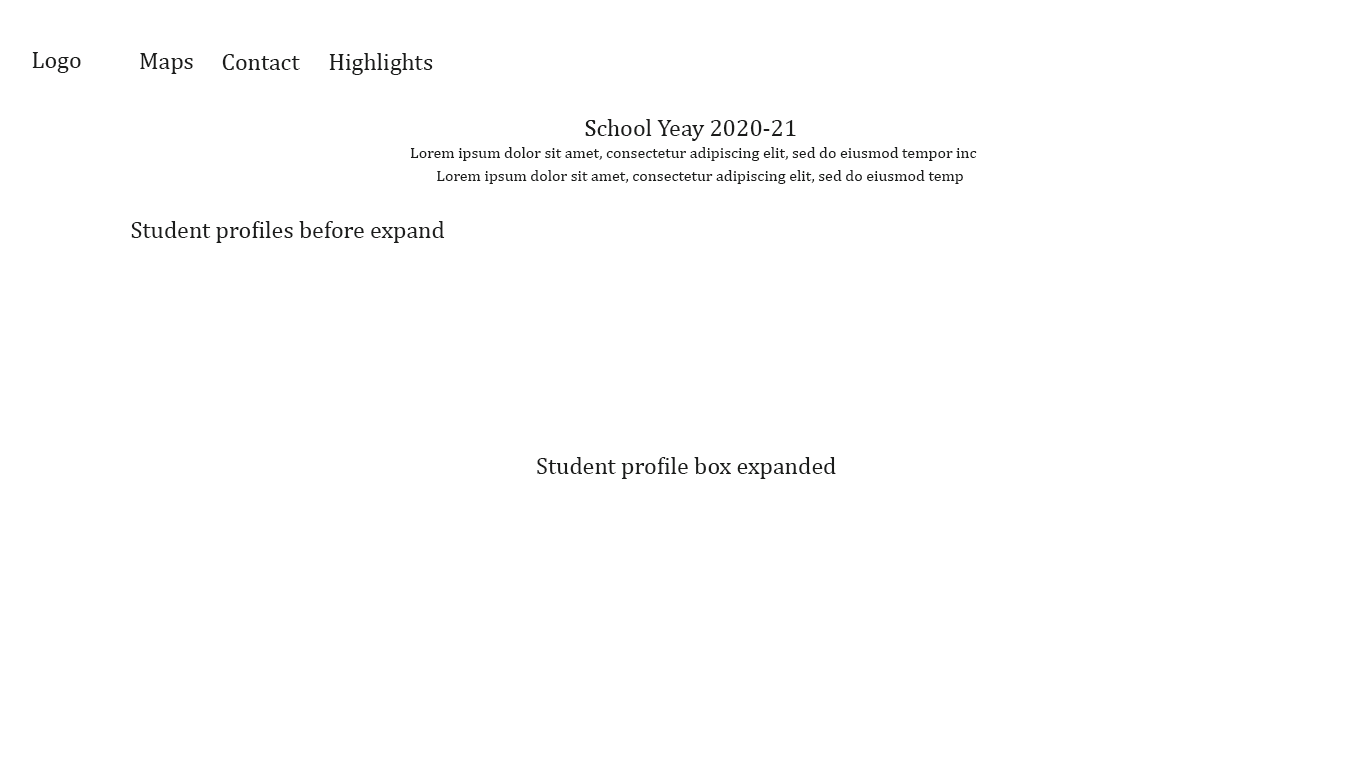
<style>
.page{position:relative;width:1366px;height:768px;background:#ffffff}
.page>*{position:absolute;margin:0}
.t1{font:24px "CambriaMath";color:#1b1c1b}
.t2{font:24px/0px "CambriaMath";color:#1b1c1b}
.t3{font:16px "CambriaMath";color:#1b1c1b}
</style>
<div class="page">
<p class="t1" style="left:32px;top:52px;width:49px;height:21px">Logo</p>
<p class="t1" style="left:140px;top:53px;width:53px;height:21px">Maps</p>
<p class="t1" style="left:222px;top:54px;width:78px;height:16px">Contact</p>
<p class="t1" style="left:329px;top:53px;width:104px;height:22px">Highlights</p>
<p class="t2" style="left:585px;top:119px;width:211px;height:22px">School Yeay 2020-21 <br>S</p>
<p class="t3" style="left:410px;top:147px;width:567px;height:14px">Lorem ipsum dolor sit amet, consectetur adipiscing elit, sed do eiusmod tempor inc</p>
<p class="t3" style="left:437px;top:170px;width:526px;height:14px">Lorem ipsum dolor sit amet, consectetur adipiscing elit, sed do eiusmod temp</p>
<p class="t1" style="left:131px;top:221px;width:314px;height:22px">Student profiles before expand</p>
<p class="t1" style="left:537px;top:457px;width:299px;height:22px">Student profile box expanded</p>
</div>
